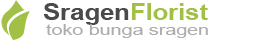
<style>
.page{position:relative;width:263px;height:42px;background:#ffffff}
.page>*{position:absolute;margin:0}
.t1{font:22.7px "Arial-BoldMT";color:#a2c046;scale:1.13 1}
.t2{font:22.7px "Arial-BoldMT";color:#4a4a4a;scale:1.13 1}
.t3{font:15.2px "ArialMT";color:#adadad;scale:1.29 1}
</style>
<div class="page">
<p class="t1" style="left:43px;top:3px;width:165px;height:22px"><span class="t2">Sragen</span>Florist</p>
<p class="t3" style="left:46px;top:24px;width:162px;height:14px">toko bunga sragen</p>
</div>
